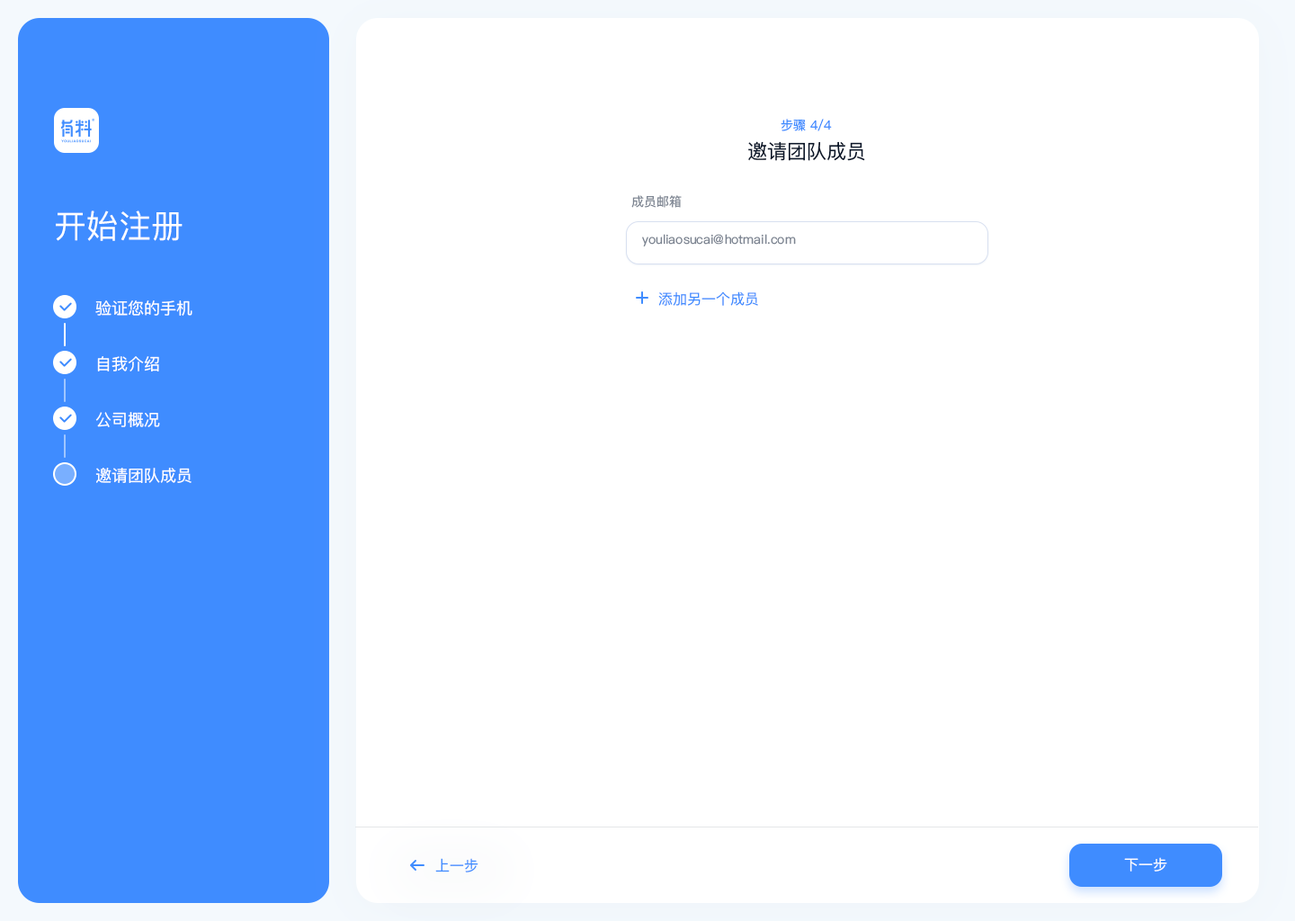
<style>
.page{position:relative;width:1295px;height:921px;background:#ffffff}
.page>*{position:absolute;margin:0}
.t1{font:12.6px "PingFangSC-Regular";color:#3f8cff;text-transform:uppercase}
.t2{font:19.8px "PingFangSC-Regular";color:#0a1629}
.t3{font:12.6px "PingFangSC-Regular";color:#7d8592}
.t4{font:32.4px "PingFangSC-Regular";color:#ffffff}
.t5{font:14.4px "PingFangSC-Regular";color:#3f8cff}
.t6{font:16.2px "PingFangSC-Regular";color:#ffffff}
.t7{font:14.4px "PingFangSC-Regular";color:#ffffff}
</style>
<div class="page">
<p class="t1" style="left:781px;top:119px;width:51px;height:12px">步骤 4/4</p>
<p class="t2" style="left:748px;top:141px;width:117px;height:20px">邀请团队成员</p>
<p class="t3" style="left:631px;top:195px;width:51px;height:13px">成员邮箱</p>
<p class="t4" style="left:56px;top:210px;width:127px;height:31px">开始注册</p>
<p class="t3" style="left:642px;top:234px;width:154px;height:12px">youliaosucai@hotmail.com</p>
<p class="t5" style="left:658px;top:291px;width:100px;height:15px">添加另一个成员</p>
<p class="t6" style="left:95px;top:300px;width:97px;height:16px">验证您的手机</p>
<p class="t6" style="left:97px;top:356px;width:62px;height:15px">自我介绍</p>
<p class="t6" style="left:95px;top:412px;width:65px;height:15px">公司概况</p>
<p class="t6" style="left:95px;top:468px;width:97px;height:15px">邀请团队成员</p>
<p class="t5" style="left:435px;top:858px;width:43px;height:14px">上一步</p>
<p class="t7" style="left:1124px;top:857px;width:43px;height:14px">下一步</p>
</div>
